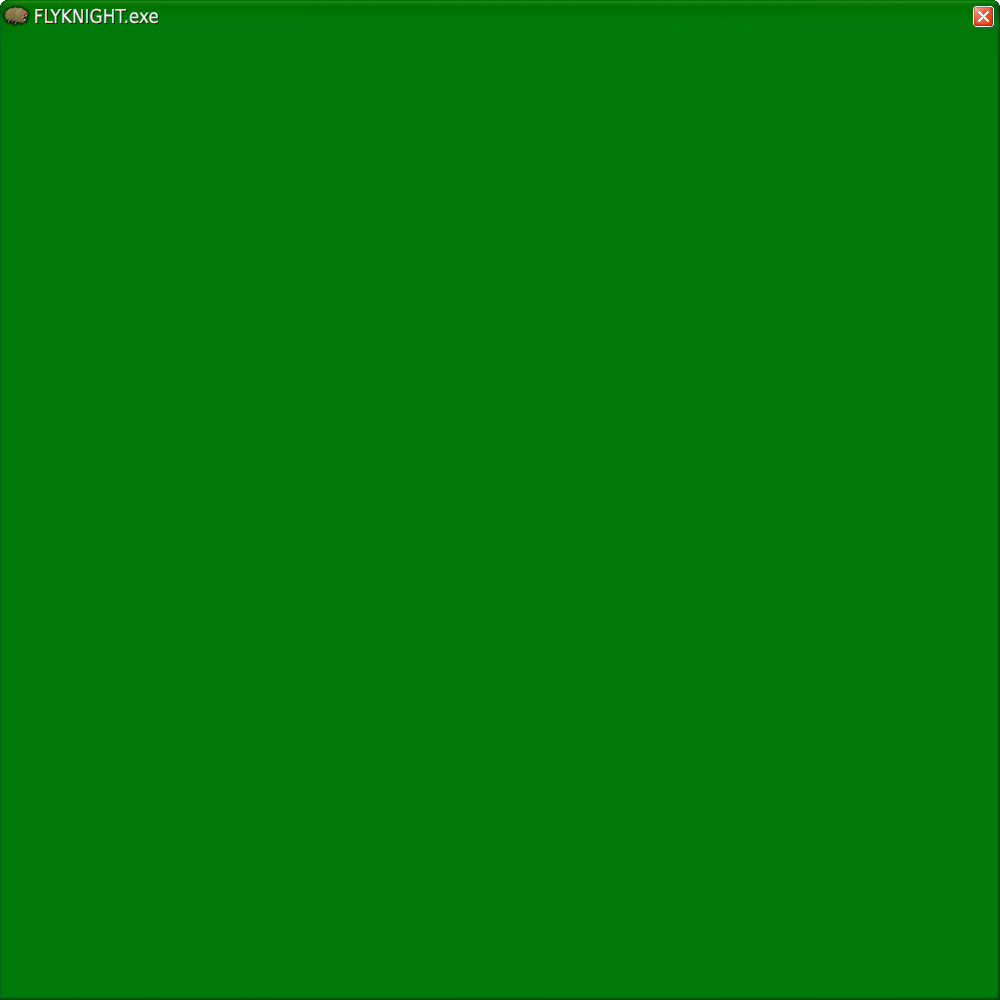
<style>
.page{position:relative;width:1000px;height:1000px;background:#00790b}
.page>*{position:absolute;margin:0}
.t1{font:18.8px "DejaVuSansCondensed"}
</style>
<div class="page">
<p class="t1" style="left:35px;top:8px;width:123px;height:16px">FLYKNIGHT.exe</p>
</div>
